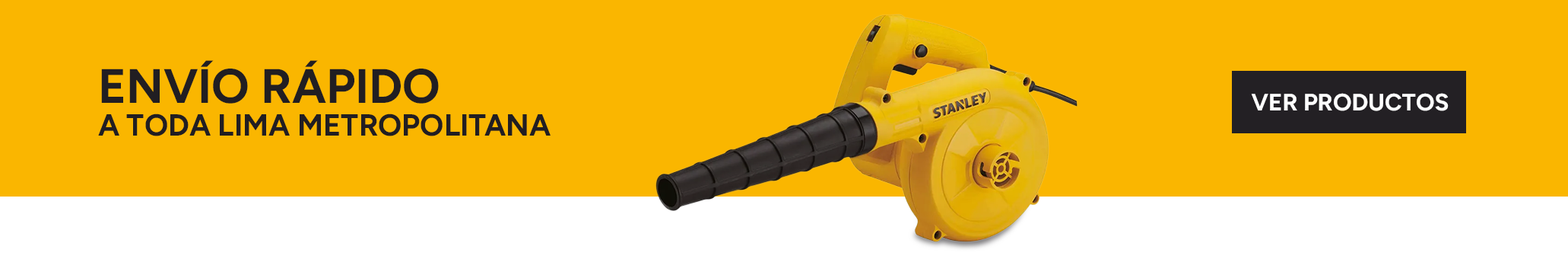
<style>
.page{position:relative;width:1568px;height:259px;background:#fab600}
.page>*{position:absolute;margin:0}
.t1{font:48.2px "Figtree-Bold";color:#211e22;text-transform:uppercase}
.t2{font:23.7px "Figtree-Bold";color:#ffffff;text-transform:uppercase}
.t3{font:30.3px "Figtree-Bold";color:#211e22;text-transform:uppercase}
</style>
<div class="page">
<p class="t1" style="left:101px;top:60px;width:338px;height:43px">ENVÍO RÁPIDO</p>
<p class="t2" style="left:1251px;top:93px;width:198px;height:18px">VER PRODUCTOS</p>
<p class="t3" style="left:98px;top:113px;width:453px;height:23px">A TODA LIMA METROPOLITANA</p>
</div>
